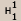
<style>
.page{position:relative;width:21px;height:21px;background:#d9cdc1}
.page>*{position:absolute;margin:0}
.t1{font:9px "Tahoma";color:#000000}
</style>
<div class="page">
<p class="t1" style="left:12px;top:1px;width:5px;height:7px">1</p>
<p class="t1" style="left:5px;top:7px;width:6px;height:7px">H</p>
<p class="t1" style="left:12px;top:13px;width:5px;height:7px">1</p>
</div>
